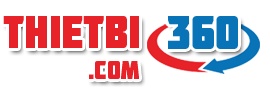
<style>
.page{position:relative;width:270px;height:90px;background:#ffffff}
.page>*{position:absolute;margin:0}
.t1{font:45.8px "Molot";color:#e72229;scale:0.9 1}
.t2{font:47.7px "Molot";color:#0973b8;scale:0.9 1}
.t3{font:25.9px "Molot";color:#e72229;scale:0.9 1}
</style>
<div class="page">
<p class="t1" style="left:3px;top:16px;width:136px;height:32px">THIETBI</p>
<p class="t2" style="left:168px;top:16px;width:70px;height:33px">360</p>
<p class="t3" style="left:89px;top:61px;width:50px;height:18px">.com</p>
</div>
